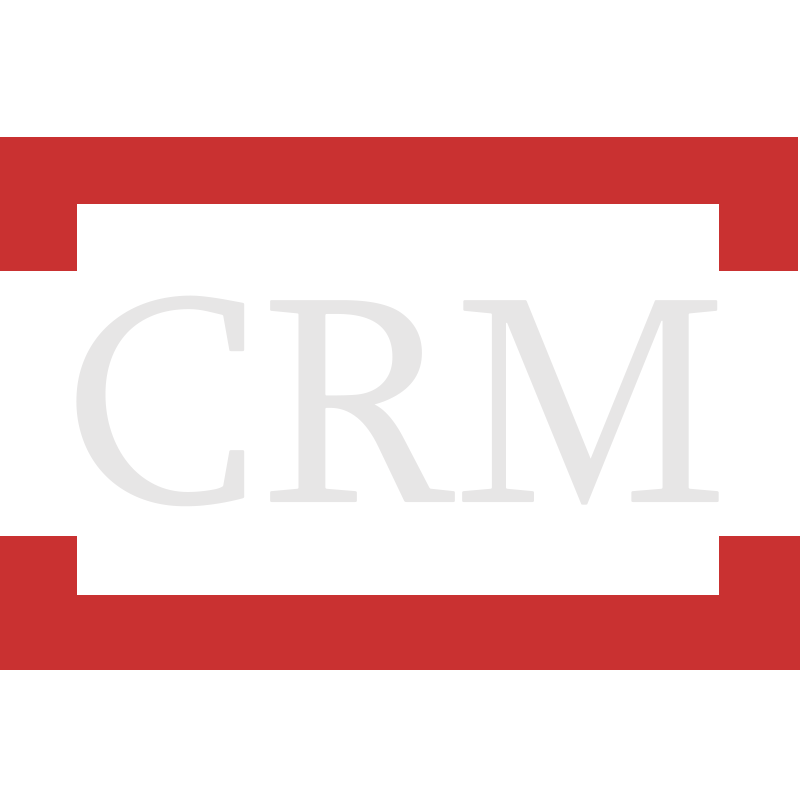
<style>
.page{position:relative;width:800px;height:800px;background:#ffffff}
.page>*{position:absolute;margin:0}
.t1{font:300px "Sylfaen";color:#e7e6e6}
</style>
<div class="page">
<p class="t1" style="left:76px;top:295px;width:643px;height:212px">CRM</p>
</div>
